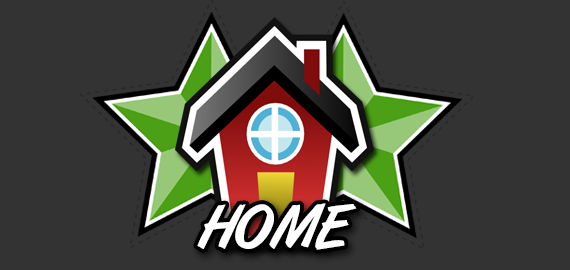
<style>
.page{position:relative;width:570px;height:270px;background:#333333}
.page>*{position:absolute;margin:0}
.t1{font:60px "ArtBrush";color:#ffffff;font-variant:small-caps}
</style>
<div class="page">
<p class="t1" style="left:197px;top:203px;width:160px;height:47px">HOME</p>
</div>
